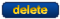
<style>
.page{position:relative;width:60px;height:19px}
.page>*{position:absolute;margin:0}
.t1{font:12px "Helvetica-Bold"}
</style>
<div class="page">
<p class="t1" style="left:13px;top:5px;width:35px;height:9px">delete</p>
</div>
